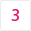
<style>
.page{position:relative;width:31px;height:31px;background:#ffffff}
.page>*{position:absolute;margin:0}
.t1{font:18px "MyriadPro-Regular";color:#e51464}
</style>
<div class="page">
<p class="t1" style="left:11px;top:9px;width:8px;height:12px">3</p>
</div>
